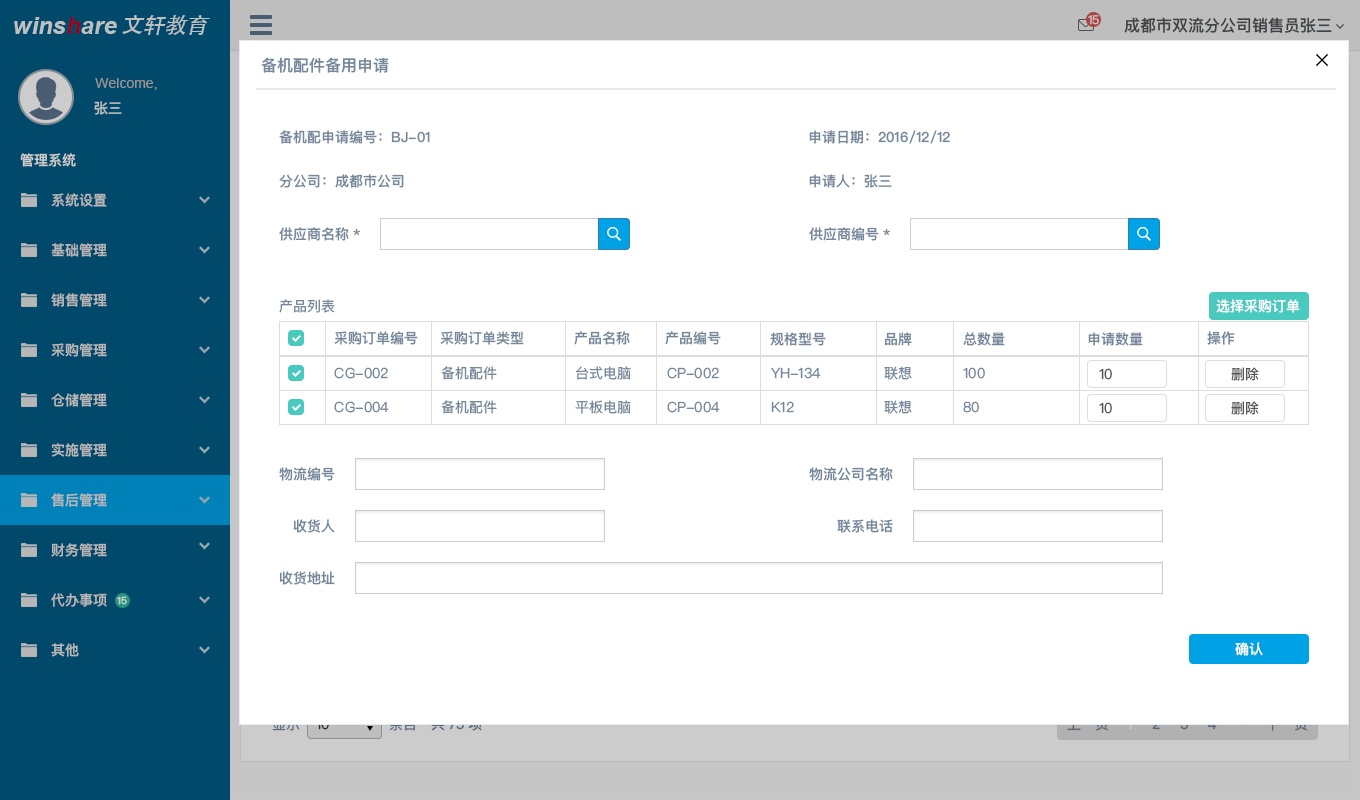
<style>
.page{position:relative;width:1360px;height:800px;background:#ffffff}
.page>*{position:absolute;margin:0}
.t1{font:24px "Arial-BoldItalicMT";color:#bdc0c1}
.t2{font:22px "STHeitiSC-Medium";color:#bdc0c1}
.t3{font:12px "PingFangSC-Regular";color:#cccccc}
.t4{font:16px "PingFangSC-Medium";color:#515356}
.t5{font:16px "PingFangSC-Medium";color:#74879b}
.t6{font:14px "ArialMT";color:#959393}
.t7{font:14px "PingFangSC-Medium";color:#bdc0c1}
.t8{font:14px "PingFangSC-Medium";color:#74879b}
.t9{font:14px "PingFangSC-Medium";color:#cccccc}
.t10{font:14px "PingFangSC-Medium";color:#b7b7b7}
.t11{font:14px "PingFangSC-Regular";color:#74879b}
.t12{font:14px "PingFangSC-Medium";color:#ffffff}
.t13{font:14px "PingFangSC-Regular";color:#555555}
.t14{font:10px "PingFangSC-Medium";color:#cccccc}
.t15{font:14px "PingFangSC-Regular";color:#5d6c7c}
.t16{font:14px "PingFangSC-Medium"}
</style>
<div class="page">
<p class="t1" style="left:14px;top:17px;width:103px;height:17px">winshare</p>
<p class="t2" style="left:122px;top:15px;width:88px;height:20px">文轩教育</p>
<p class="t3" style="left:1088px;top:15px;width:11px;height:10px">15</p>
<p class="t4" style="left:1124px;top:17px;width:208px;height:16px">成都市双流分公司销售员张三</p>
<p class="t5" style="left:261px;top:57px;width:128px;height:16px">备机配件备用申请</p>
<p class="t6" style="left:95px;top:78px;width:62px;height:12px">Welcome,</p>
<p class="t7" style="left:94px;top:101px;width:28px;height:14px">张三</p>
<p class="t8" style="left:279px;top:130px;width:151px;height:14px">备机配申请编号：BJ-01</p>
<p class="t8" style="left:809px;top:130px;width:141px;height:14px">申请日期：2016/12/12</p>
<p class="t9" style="left:20px;top:153px;width:56px;height:14px">管理系统</p>
<p class="t8" style="left:279px;top:174px;width:125px;height:14px">分公司：成都市公司</p>
<p class="t8" style="left:809px;top:174px;width:83px;height:14px">申请人：张三</p>
<p class="t10" style="left:51px;top:193px;width:56px;height:14px">系统设置</p>
<p class="t8" style="left:279px;top:227px;width:81px;height:14px">供应商名称*</p>
<p class="t8" style="left:809px;top:227px;width:81px;height:14px">供应商编号*</p>
<p class="t10" style="left:51px;top:243px;width:56px;height:14px">基础管理</p>
<p class="t10" style="left:51px;top:293px;width:56px;height:14px">销售管理</p>
<p class="t11" style="left:279px;top:299px;width:56px;height:14px">产品列表</p>
<p class="t12" style="left:1216px;top:299px;width:84px;height:14px">选择采购订单</p>
<p class="t8" style="left:334px;top:331px;width:84px;height:14px">采购订单编号</p>
<p class="t8" style="left:440px;top:331px;width:84px;height:14px">采购订单类型</p>
<p class="t8" style="left:574px;top:331px;width:56px;height:14px">产品名称</p>
<p class="t8" style="left:665px;top:331px;width:56px;height:14px">产品编号</p>
<p class="t8" style="left:770px;top:332px;width:56px;height:14px">规格型号</p>
<p class="t8" style="left:885px;top:332px;width:27px;height:14px">品牌</p>
<p class="t8" style="left:963px;top:332px;width:42px;height:14px">总数量</p>
<p class="t8" style="left:1088px;top:332px;width:55px;height:14px">申请数量</p>
<p class="t8" style="left:1207px;top:331px;width:28px;height:14px">操作</p>
<p class="t10" style="left:51px;top:343px;width:56px;height:14px">采购管理</p>
<p class="t11" style="left:441px;top:366px;width:56px;height:14px">备机配件</p>
<p class="t11" style="left:576px;top:366px;width:55px;height:14px">台式电脑</p>
<p class="t11" style="left:884px;top:366px;width:28px;height:14px">联想</p>
<p class="t11" style="left:334px;top:367px;width:54px;height:12px">CG-002</p>
<p class="t11" style="left:667px;top:367px;width:52px;height:12px">CP-002</p>
<p class="t11" style="left:771px;top:367px;width:50px;height:12px">YH-134</p>
<p class="t11" style="left:963px;top:367px;width:22px;height:12px">100</p>
<p class="t13" style="left:1099px;top:368px;width:13px;height:12px">10</p>
<p class="t13" style="left:1231px;top:367px;width:28px;height:14px">删除</p>
<p class="t10" style="left:51px;top:393px;width:56px;height:14px">仓储管理</p>
<p class="t11" style="left:334px;top:401px;width:55px;height:12px">CG-004</p>
<p class="t11" style="left:441px;top:400px;width:56px;height:14px">备机配件</p>
<p class="t11" style="left:575px;top:400px;width:56px;height:14px">平板电脑</p>
<p class="t11" style="left:667px;top:401px;width:53px;height:12px">CP-004</p>
<p class="t11" style="left:771px;top:401px;width:23px;height:12px">K12</p>
<p class="t11" style="left:884px;top:400px;width:28px;height:14px">联想</p>
<p class="t11" style="left:963px;top:401px;width:16px;height:12px">80</p>
<p class="t13" style="left:1231px;top:401px;width:28px;height:14px">删除</p>
<p class="t13" style="left:1099px;top:402px;width:13px;height:12px">10</p>
<p class="t10" style="left:51px;top:443px;width:56px;height:14px">实施管理</p>
<p class="t8" style="left:279px;top:467px;width:56px;height:14px">物流编号</p>
<p class="t8" style="left:809px;top:467px;width:84px;height:14px">物流公司名称</p>
<p class="t10" style="left:51px;top:493px;width:56px;height:14px">售后管理</p>
<p class="t8" style="left:293px;top:519px;width:42px;height:14px">收货人</p>
<p class="t8" style="left:837px;top:519px;width:56px;height:14px">联系电话</p>
<p class="t10" style="left:51px;top:543px;width:56px;height:14px">财务管理</p>
<p class="t8" style="left:279px;top:571px;width:56px;height:14px">收货地址</p>
<p class="t10" style="left:51px;top:593px;width:56px;height:14px">代办事项</p>
<p class="t14" style="left:117px;top:596px;width:10px;height:9px">15</p>
<p class="t10" style="left:51px;top:643px;width:28px;height:14px">其他</p>
<p class="t12" style="left:1235px;top:642px;width:28px;height:14px">确认</p>
<p class="t15" style="left:389px;top:717px;width:26px;height:14px">条目</p>
<p class="t16" style="left:1208px;top:718px;width:9px;height:12px">4</p>
</div>
